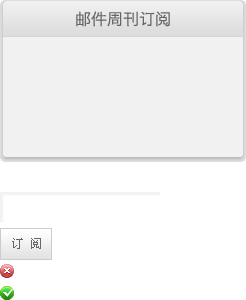
<style>
.page{position:relative;width:246px;height:300px;background:#ffffff}
.page>*{position:absolute;margin:0}
.t1{font:16px "HiraginoSansGB-W3";color:#666666}
.t2{font:12px "SimSun";letter-spacing:0.02em;color:#666666}
</style>
<div class="page">
<p class="t1" style="left:76px;top:11px;width:94px;height:16px">邮件周刊订阅</p>
<p class="t2" style="left:12px;top:238px;width:29px;height:11px">订 阅</p>
</div>
